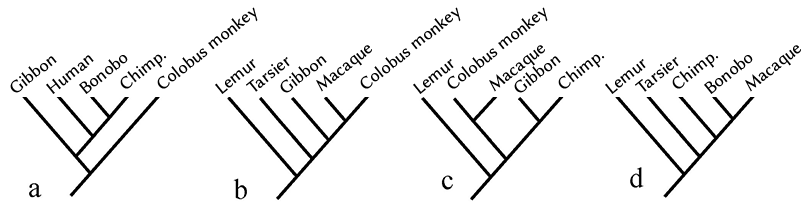
<style>
.page{position:relative;width:811px;height:205px;background:#ffffff}
.page>*{position:absolute;margin:0}
.t1{font:18px "LinBiolinumO";color:#000000}
</style>
<div class="page">
<p class="t1" style="left:157px;top:7px;width:101px;height:82px;rotate:-39deg">Colobus monkey</p>
<p class="t1" style="left:360px;top:7px;width:101px;height:82px;rotate:-39deg">Colobus monkey</p>
<p class="t1" style="left:447px;top:7px;width:101px;height:82px;rotate:-39deg">Colobus monkey</p>
<p class="t1" style="left:120px;top:54px;width:47px;height:35px;rotate:-39deg">Chimp.</p>
<p class="t1" style="left:316px;top:45px;width:56px;height:47px;rotate:-39deg">Macaque</p>
<p class="t1" style="left:489px;top:45px;width:56px;height:47px;rotate:-39deg">Macaque</p>
<p class="t1" style="left:558px;top:54px;width:47px;height:35px;rotate:-39deg">Chimp.</p>
<p class="t1" style="left:672px;top:54px;width:47px;height:35px;rotate:-39deg">Chimp.</p>
<p class="t1" style="left:745px;top:45px;width:56px;height:47px;rotate:-39deg">Macaque</p>
<p class="t1" style="left:10px;top:56px;width:47px;height:37px;rotate:-39deg">Gibbon</p>
<p class="t1" style="left:46px;top:55px;width:48px;height:39px;rotate:-39deg">Human</p>
<p class="t1" style="left:79px;top:55px;width:49px;height:39px;rotate:-39deg">Bonobo</p>
<p class="t1" style="left:215px;top:59px;width:41px;height:35px;rotate:-39deg">Lemur</p>
<p class="t1" style="left:246px;top:57px;width:44px;height:35px;rotate:-39deg">Tarsier</p>
<p class="t1" style="left:280px;top:56px;width:47px;height:37px;rotate:-39deg">Gibbon</p>
<p class="t1" style="left:413px;top:59px;width:41px;height:35px;rotate:-39deg">Lemur</p>
<p class="t1" style="left:514px;top:56px;width:47px;height:37px;rotate:-39deg">Gibbon</p>
<p class="t1" style="left:605px;top:59px;width:41px;height:35px;rotate:-39deg">Lemur</p>
<p class="t1" style="left:635px;top:57px;width:44px;height:35px;rotate:-39deg">Tarsier</p>
<p class="t1" style="left:704px;top:55px;width:49px;height:39px;rotate:-39deg">Bonobo</p>
</div>
